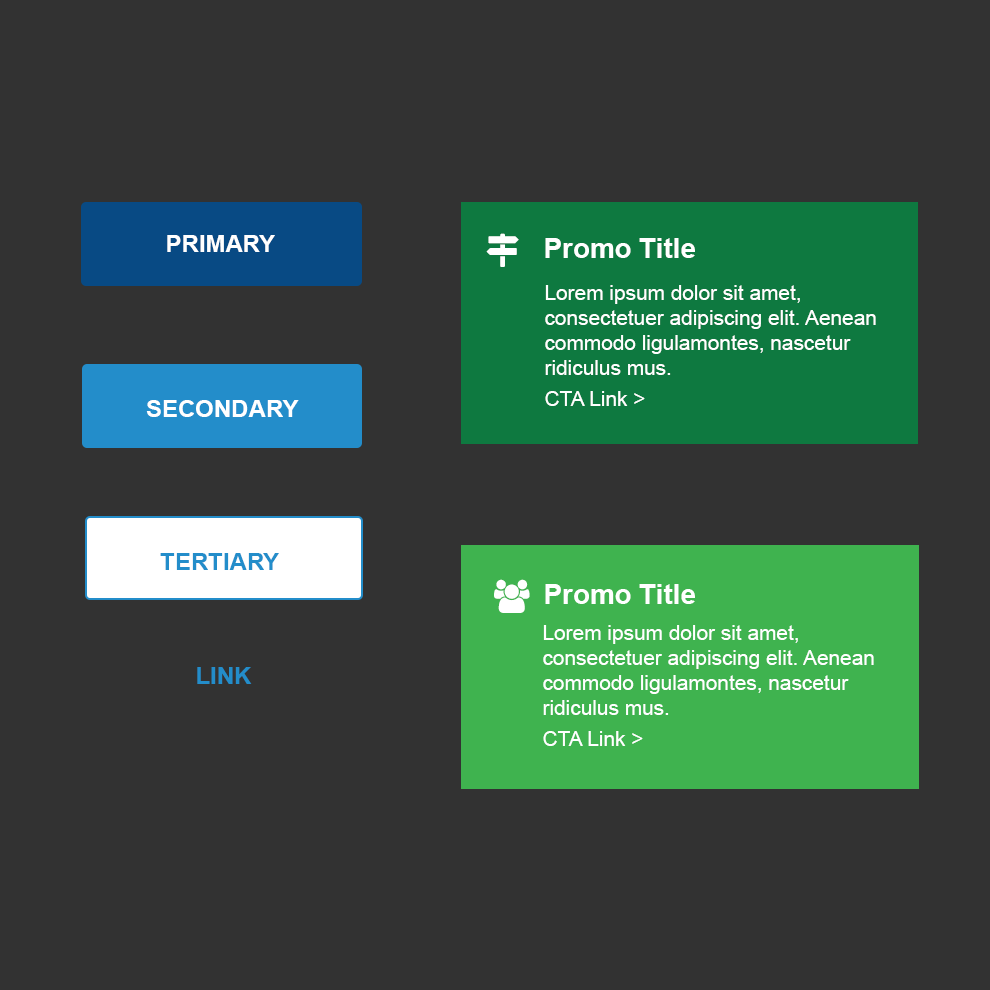
<style>
.page{position:relative;width:990px;height:990px;background:#323232}
.page>*{position:absolute;margin:0}
.t1{font:24px "Arial-BoldMT";color:#ffffff;text-transform:uppercase}
.t2{font:27.8px "Arial-BoldMT";color:#ffffff}
.t3{font:20.8px "ArialMT";color:#ffffff}
.t4{font:24px "Arial-BoldMT";color:#238dca;text-transform:uppercase}
</style>
<div class="page">
<p class="t1" style="left:167px;top:235px;width:108px;height:17px">Primary</p>
<p class="t2" style="left:545px;top:238px;width:150px;height:20px">Promo Title</p>
<p class="t3" style="left:545px;top:285px;width:331px;height:121px">Lorem ipsum dolor sit amet, consectetuer adipiscing elit. Aenean commodo ligulamontes, nascetur ridiculus mus.<br>CTA Link &gt;</p>
<p class="t1" style="left:146px;top:400px;width:153px;height:17px">Secondary</p>
<p class="t4" style="left:160px;top:553px;width:119px;height:17px">Tertiary</p>
<p class="t2" style="left:545px;top:584px;width:150px;height:20px">Promo Title</p>
<p class="t3" style="left:543px;top:625px;width:331px;height:121px">Lorem ipsum dolor sit amet, consectetuer adipiscing elit. Aenean commodo ligulamontes, nascetur ridiculus mus.<br>CTA Link &gt;</p>
<p class="t4" style="left:197px;top:667px;width:55px;height:17px">Link</p>
</div>
